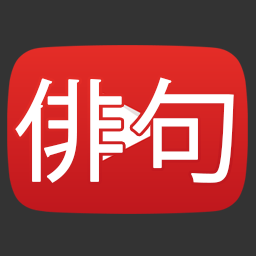
<style>
.page{position:relative;width:256px;height:256px;background:#333333}
.page>*{position:absolute;margin:0}
.t1{font:110.8px "KozGoPr6N-Regular";color:#ffffff;text-transform:uppercase;font-weight:bold}
</style>
<div class="page">
<p class="t1" style="left:15px;top:77px;width:219px;height:106px">俳句</p>
</div>
